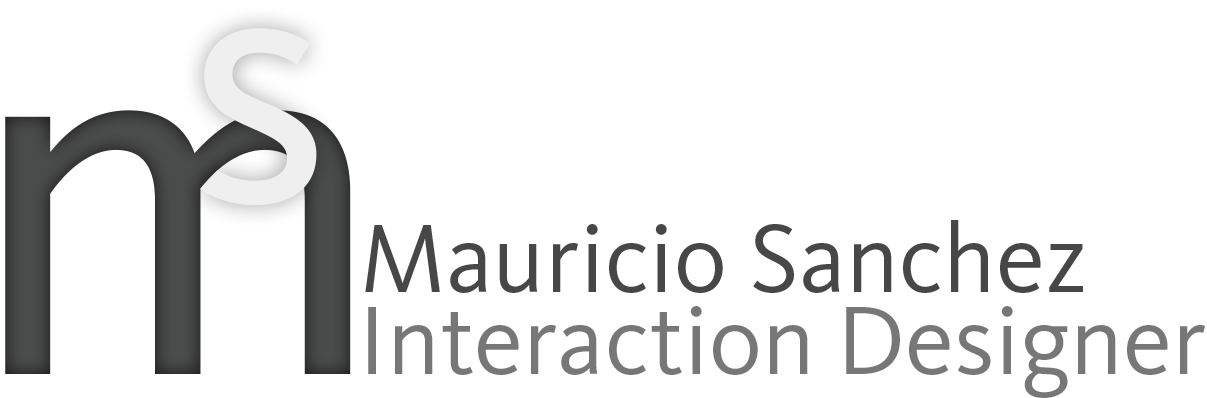
<style>
.page{position:relative;width:1207px;height:398px;background:#ffffff}
.page>*{position:absolute;margin:0}
.t1{font:100px "KievitPro-Regular";color:#474747}
.t2{font:100px "KievitPro-Regular";color:#777777}
</style>
<div class="page">
<p class="t1" style="left:365px;top:220px;width:718px;height:73px">Mauricio Sanchez</p>
<p class="t2" style="left:368px;top:306px;width:837px;height:92px">Interaction Designer</p>
</div>
